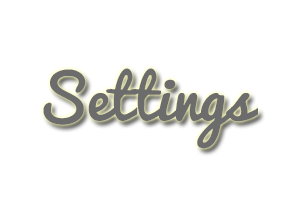
<style>
.page{position:relative;width:300px;height:200px;background:#ffffff}
.page>*{position:absolute;margin:0}
.t1{font:60px "Pacifico-Regular";color:#6c6c6c}
</style>
<div class="page">
<p class="t1" style="left:43px;top:68px;width:215px;height:81px">Settings</p>
</div>
